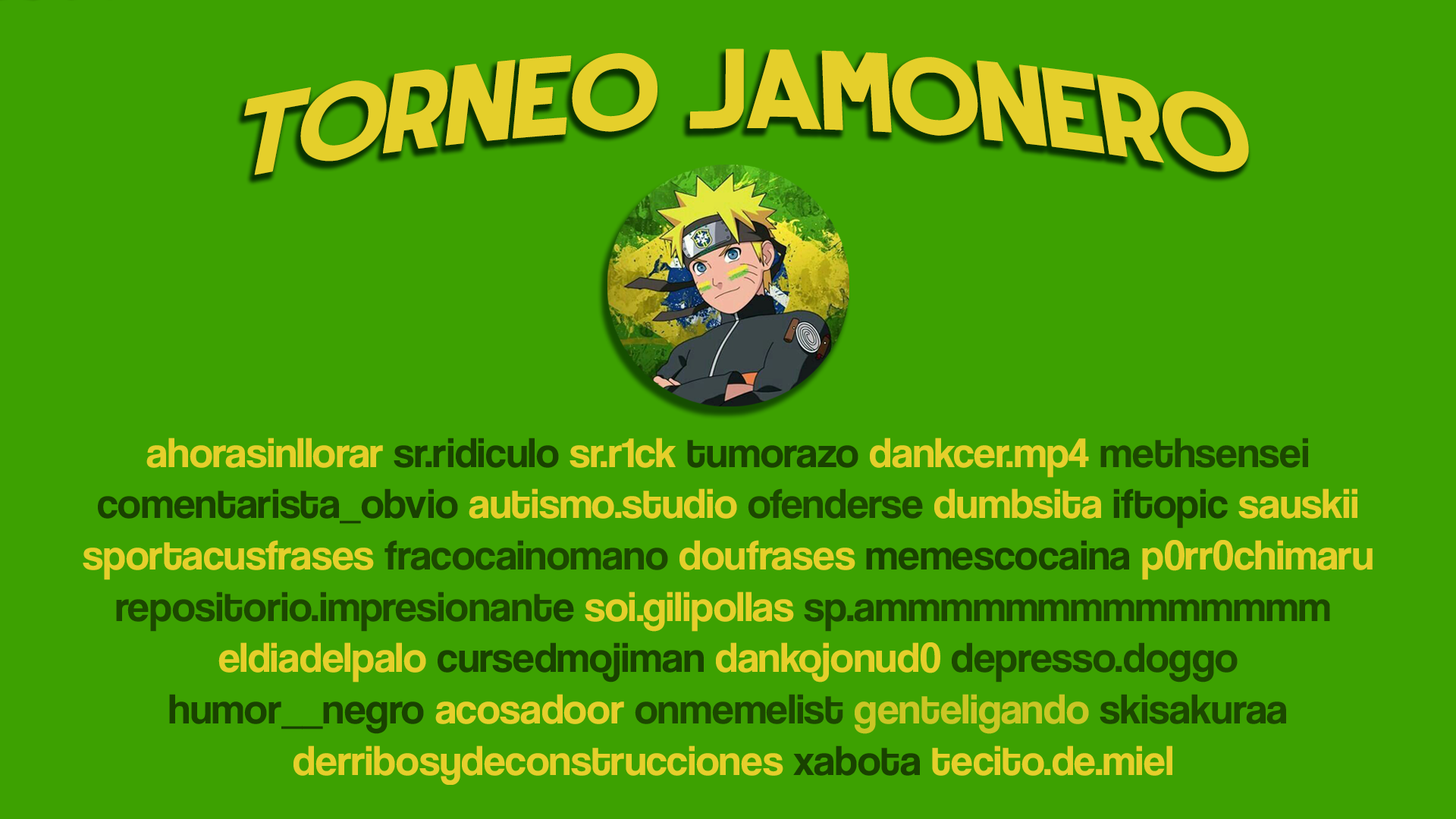
<style>
.page{position:relative;width:1456px;height:819px;background:#3da101}
.page>*{position:absolute;margin:0}
.t1{font:117.3px "RoundedSans";color:#e5cf2b}
.t2{font:43.1px "CoolveticaRg-Regular";color:#e5cf2b}
.t3{font:43.1px "CoolveticaRg-Regular";color:#194200}
.t4{font:43.1px "CoolveticaRg-Regular";color:#1c4800}
.t5{font:43.1px "CoolveticaRg-Regular";color:#c9c625}
</style>
<div class="page">
<p class="t1" style="left:244px;top:49px;width:1005px;height:126px">TORNEO jamonero</p>
<p class="t2" style="left:83px;top:438px;width:1290px;height:347px;text-align:center">ahorasinllorar <span class="t3">sr.ridiculo</span> sr.r1ck <span class="t3">tumorazo </span>dankcer.mp4 <span class="t4">methsensei<br></span><span class="t3">comentarista_obvio </span>autismo.studio <span class="t4">ofenderse </span>dumbsita <span class="t3">iftopic </span>sauskii<br>sportacusfrases <span class="t4">fracocainomano </span>doufrases <span class="t3">memescocaina </span>p0rr0chimaru<br><span class="t4">repositorio.impresionant</span><span class="t3">e</span> soi.gilipollas <span class="t4">sp.ammmmmmmmmmmmmm <br></span>eldiadelpalo <span class="t3">cursedmojiman</span> dankojonud0 <span class="t4">depresso.doggo<br></span><span class="t3">humor__negro</span> acosadoor <span class="t4">onmemelist </span><span class="t5">genteligando </span><span class="t4">skisakuraa<br></span> derribosydeconstrucciones <span class="t3">xabota</span> tecito.de.miel</p>
</div>
